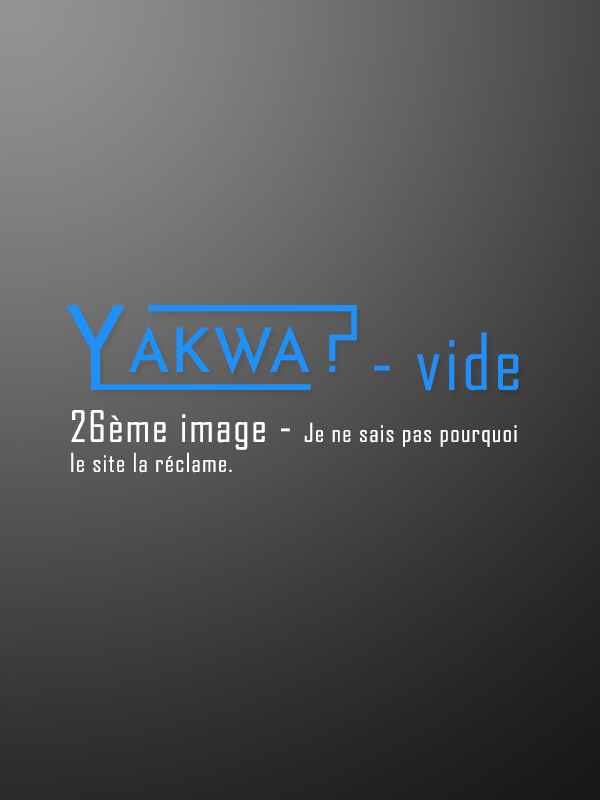
<style>
.page{position:relative;width:600px;height:800px}
.page>*{position:absolute;margin:0}
.t1{font:75px "AgencyFB-Reg";letter-spacing:0.05em;color:#2090f9}
.t2{font:100px "AgencyFB-Reg";letter-spacing:0.05em;color:#2090f9}
.t3{font:25px "AgencyFB-Reg";letter-spacing:0.05em;color:#ffffff}
.t4{font:41.7px "AgencyFB-Reg";letter-spacing:0.05em;color:#ffffff}
</style>
<div class="page">
<p class="t1" style="left:374px;top:332px;width:145px;height:59px"><span class="t2">            </span>- vide</p>
<p class="t3" style="left:71px;top:410px;width:446px;height:63px"><span class="t4">26ème image - </span>Je ne sais pas pourquoi<br>le site la réclame.</p>
</div>
